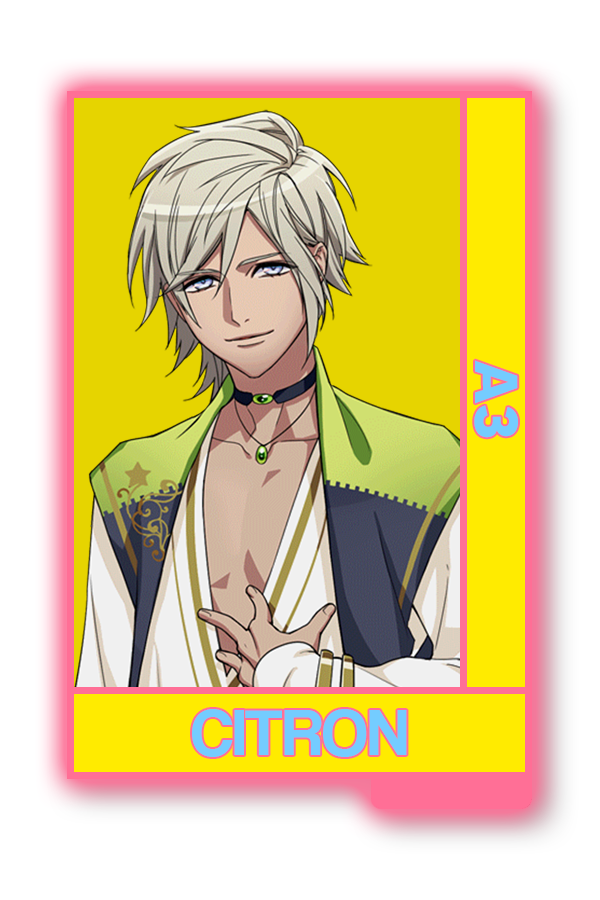
<style>
.page{position:relative;width:600px;height:900px;background:#ffffff}
.page>*{position:absolute;margin:0}
.t1{font:60.5px "MADETOMMY-Bold";color:#74ccff}
.t2{font:67.8px "CoolveticaRg-Regular";color:#74ccff}
</style>
<div class="page">
<p class="t1" style="left:474px;top:360px;width:44px;height:78px;rotate:90deg">A3</p>
<p class="t2" style="left:192px;top:709px;width:215px;height:48px">CITRON</p>
</div>
